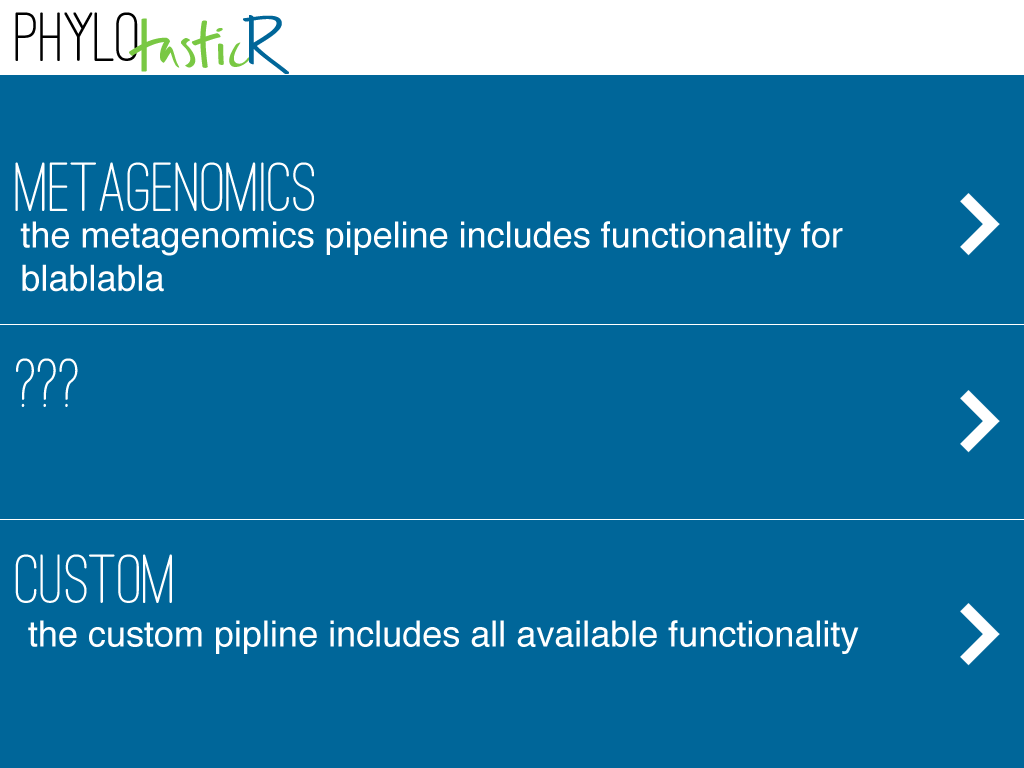
<style>
.page{position:relative;width:1024px;height:768px;background:#006699}
.page>*{position:absolute;margin:0}
.t1{font:72px/196px "OstrichSansRounded-Medium";color:#ffffff}
.t2{font:36px "Helvetica";color:#ffffff}
</style>
<div class="page">
<p class="t1" style="left:15px;top:162px;width:299px;height:441px">metagenomics<br>???<br>custom</p>
<p class="t2" style="left:20px;top:221px;width:823px;height:71px">the metagenomics pipeline includes functionality for<br>blablabla</p>
<p class="t2" style="left:28px;top:620px;width:831px;height:34px">the custom pipline includes all available functionality</p>
</div>
